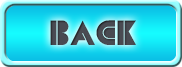
<style>
.page{position:relative;width:182px;height:67px}
.page>*{position:absolute;margin:0}
.t1{font:36px "CSBlocks";color:#494b52}
</style>
<div class="page">
<p class="t1" style="left:50px;top:20px;width:86px;height:25px">Back</p>
</div>
